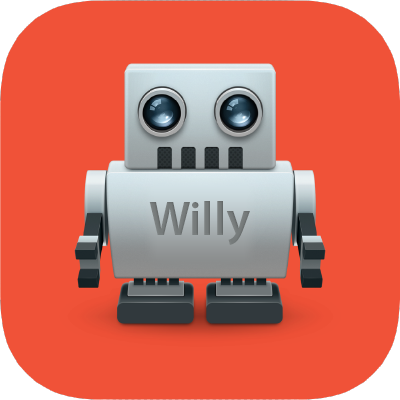
<style>
.page{position:relative;width:400px;height:400px;background:#f05238}
.page>*{position:absolute;margin:0}
.t1{font:47.7px "MyriadPro-Semibold";color:#767b7b}
</style>
<div class="page">
<p class="t1" style="left:149px;top:201px;width:101px;height:44px">Willy</p>
</div>
